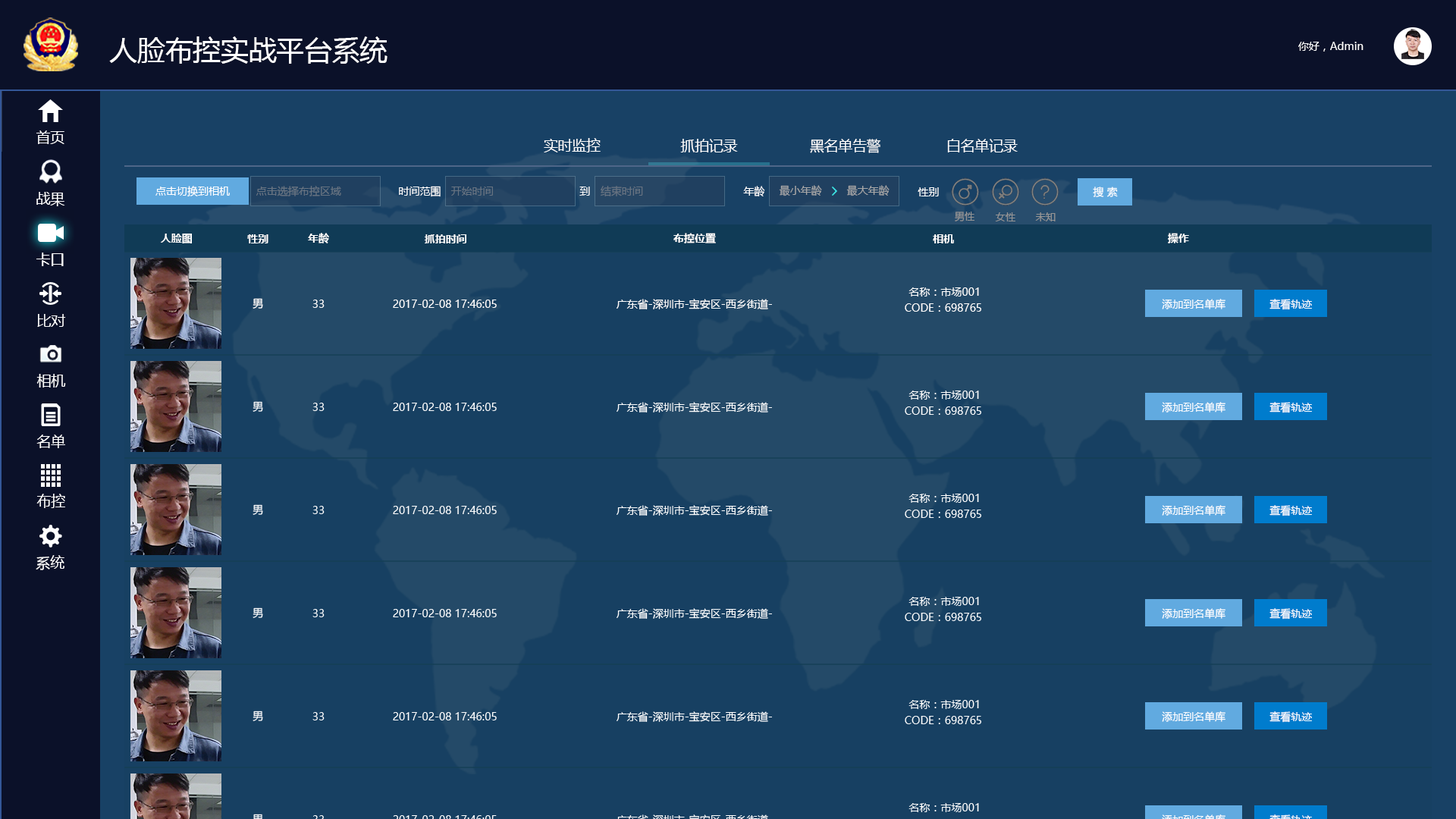
<style>
.page{position:relative;width:1456px;height:819px;background:#174062}
.page>*{position:absolute;margin:0}
.t1{font:14.2px "MicrosoftYaHei";color:#ffffff}
.t2{font:10.6px "MicrosoftYaHei";color:#ffffff}
.t3{font:10.6px "MicrosoftYaHei";color:#687482}
.t4{font:10.6px "MicrosoftYaHei";color:#a9a9a9}
.t5{font:10.1px "MicrosoftYaHei";color:#959595}
.t6{font:10.6px "MicrosoftYaHei-Bold";color:#ffffff}
</style>
<div class="page">
<p class="t1" style="left:544px;top:138px;width:57px;height:14px">实时监控</p>
<p class="t1" style="left:680px;top:139px;width:58px;height:13px">抓拍记录</p>
<p class="t1" style="left:810px;top:139px;width:70px;height:14px">黑名单告警</p>
<p class="t1" style="left:947px;top:139px;width:71px;height:13px">白名单记录</p>
<p class="t2" style="left:155px;top:186px;width:75px;height:10px">点击切换到相机</p>
<p class="t3" style="left:256px;top:186px;width:85px;height:10px">点击选择布控区域</p>
<p class="t2" style="left:399px;top:186px;width:42px;height:11px">时间范围</p>
<p class="t3" style="left:601px;top:186px;width:42px;height:10px">结束时间</p>
<p class="t2" style="left:743px;top:186px;width:22px;height:10px">年龄</p>
<p class="t4" style="left:779px;top:185px;width:43px;height:11px">最小年龄</p>
<p class="t4" style="left:846px;top:185px;width:44px;height:11px">最大年龄</p>
<p class="t3" style="left:450px;top:187px;width:43px;height:9px">开始时间</p>
<p class="t2" style="left:579px;top:187px;width:11px;height:9px">到</p>
<p class="t2" style="left:918px;top:187px;width:21px;height:9px">性别</p>
<p class="t2" style="left:1093px;top:187px;width:25px;height:10px">搜 索</p>
<p class="t5" style="left:955px;top:212px;width:19px;height:9px">男性</p>
<p class="t5" style="left:995px;top:212px;width:20px;height:9px">女性</p>
<p class="t5" style="left:1035px;top:212px;width:21px;height:9px">未知</p>
<p class="t6" style="left:160px;top:234px;width:32px;height:9px">人脸图</p>
<p class="t6" style="left:308px;top:233px;width:21px;height:10px">年龄</p>
<p class="t6" style="left:673px;top:233px;width:43px;height:10px">布控位置</p>
<p class="t6" style="left:1168px;top:233px;width:21px;height:10px">操作</p>
<p class="t6" style="left:247px;top:234px;width:21px;height:9px">性别</p>
<p class="t6" style="left:424px;top:234px;width:42px;height:9px">抓拍时间</p>
<p class="t6" style="left:933px;top:234px;width:21px;height:9px">相机</p>
<p class="t2" style="left:908px;top:287px;width:71px;height:10px">名称：市场001</p>
<p class="t2" style="left:253px;top:298px;width:10px;height:11px">男</p>
<p class="t2" style="left:312px;top:300px;width:13px;height:8px">33</p>
<p class="t2" style="left:393px;top:300px;width:104px;height:8px">2017-02-08 17:46:05</p>
<p class="t2" style="left:617px;top:299px;width:155px;height:10px">广东省-深圳市-宝安区-西乡街道-</p>
<p class="t2" style="left:905px;top:303px;width:76px;height:9px">CODE：698765</p>
<p class="t2" style="left:1162px;top:299px;width:63px;height:10px">添加到名单库</p>
<p class="t2" style="left:1269px;top:299px;width:43px;height:11px">查看轨迹</p>
</div>
